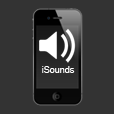
<style>
.page{position:relative;width:114px;height:114px;background:#333333}
.page>*{position:absolute;margin:0}
.t1{font:9px "Helvetica";color:#ffffff}
</style>
<div class="page">
<p class="t1" style="left:42px;top:66px;width:33px;height:7px">iSounds</p>
</div>
